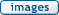
<style>
.page{position:relative;width:59px;height:15px;background:#ffffff}
.page>*{position:absolute;margin:0}
.t1{font:10.8px "TrebuchetMS";letter-spacing:0.025em;color:#006699;scale:1.11 1}
</style>
<div class="page">
<p class="t1" style="left:10px;top:2px;width:39px;height:11px">images</p>
</div>
